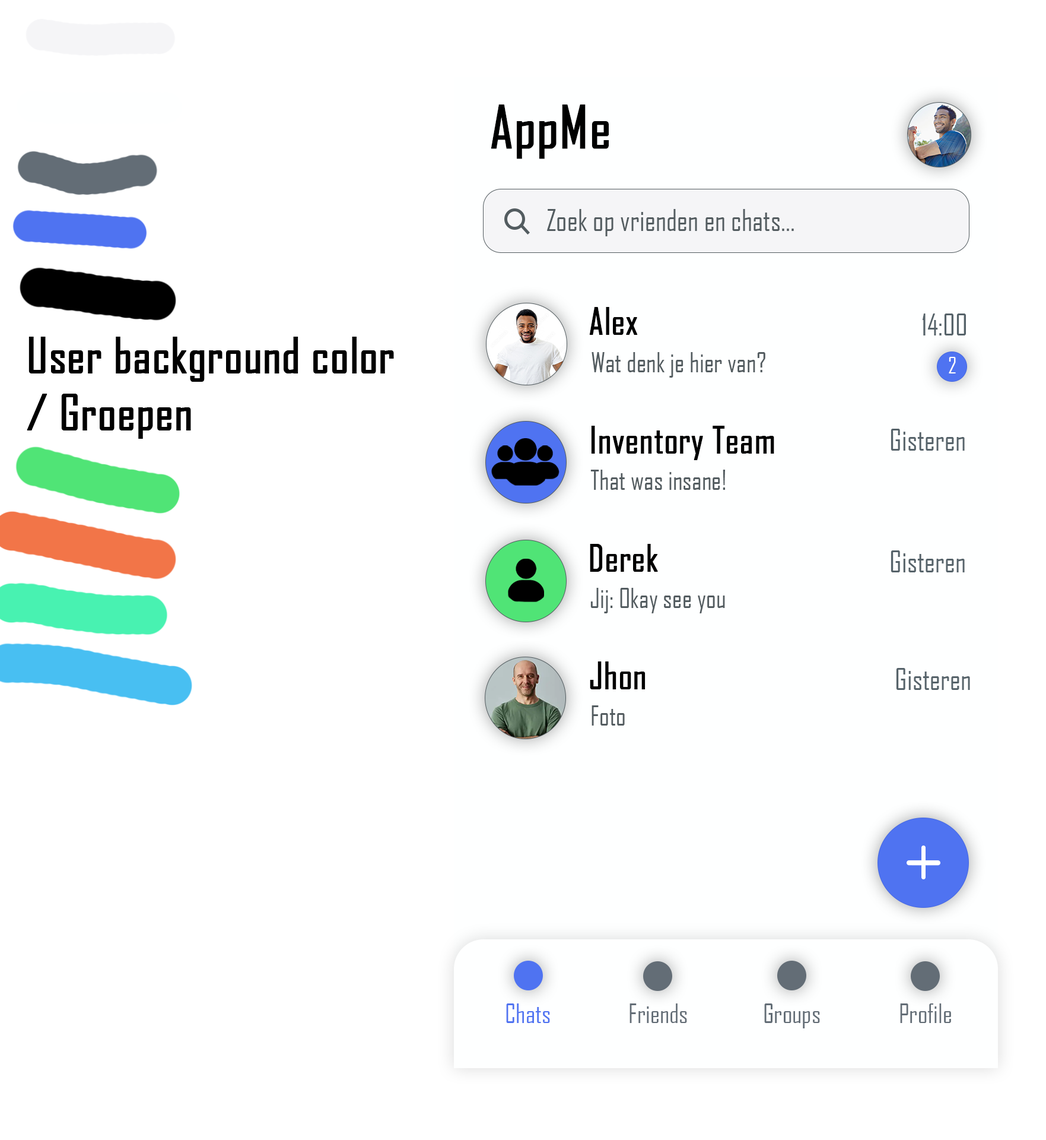
<style>
.page{position:relative;width:1046px;height:1140px;background:#ffffff}
.page>*{position:absolute;margin:0}
.t1{font:56.4px "AgencyFB-Reg";color:#000000;font-weight:bold}
.t2{font:28.6px "AgencyFB-Reg";color:#535c60}
.t3{font:35.6px "AgencyFB-Reg";color:#000000;font-weight:bold}
.t4{font:28.5px "AgencyFB-Reg";color:#56636a}
.t5{font:47.5px "AgencyFB-Reg";color:#000000;font-weight:bold}
.t6{font:26.1px "AgencyFB-Reg";color:#535c60}
.t7{font:21.4px "AgencyFB-Reg";color:#ffffff}
.t8{font:25.6px "AgencyFB-Reg";color:#4f73f1}
.t9{font:25.6px "AgencyFB-Reg";color:#636d76}
</style>
<div class="page">
<p class="t1" style="left:491px;top:104px;width:118px;height:55px">AppMe</p>
<p class="t2" style="left:547px;top:209px;width:247px;height:27px">Zoek op vrienden en chats...</p>
<p class="t3" style="left:589px;top:307px;width:49px;height:28px">Alex</p>
<p class="t4" style="left:922px;top:313px;width:44px;height:22px">14:00</p>
<p class="t5" style="left:27px;top:337px;width:367px;height:102px">User background color<br>/ Groepen</p>
<p class="t6" style="left:592px;top:352px;width:174px;height:25px">Wat denk je hier van?</p>
<p class="t7" style="left:949px;top:357px;width:7px;height:16px">2</p>
<p class="t3" style="left:591px;top:426px;width:184px;height:34px">Inventory Team</p>
<p class="t4" style="left:891px;top:429px;width:74px;height:21px">Gisteren</p>
<p class="t6" style="left:591px;top:469px;width:134px;height:21px">That was insane!</p>
<p class="t3" style="left:590px;top:544px;width:68px;height:28px">Derek</p>
<p class="t4" style="left:891px;top:550px;width:74px;height:22px">Gisteren</p>
<p class="t6" style="left:591px;top:588px;width:134px;height:25px">Jij: Okay see you</p>
<p class="t3" style="left:590px;top:661px;width:56px;height:28px">Jhon</p>
<p class="t4" style="left:896px;top:668px;width:74px;height:22px">Gisteren</p>
<p class="t6" style="left:592px;top:705px;width:33px;height:20px">Foto</p>
<p class="t8" style="left:506px;top:1003px;width:44px;height:20px">Chats</p>
<p class="t9" style="left:630px;top:1003px;width:57px;height:20px">Friends</p>
<p class="t9" style="left:764px;top:1003px;width:56px;height:25px">Groups</p>
<p class="t9" style="left:900px;top:1003px;width:51px;height:20px">Profile</p>
</div>
